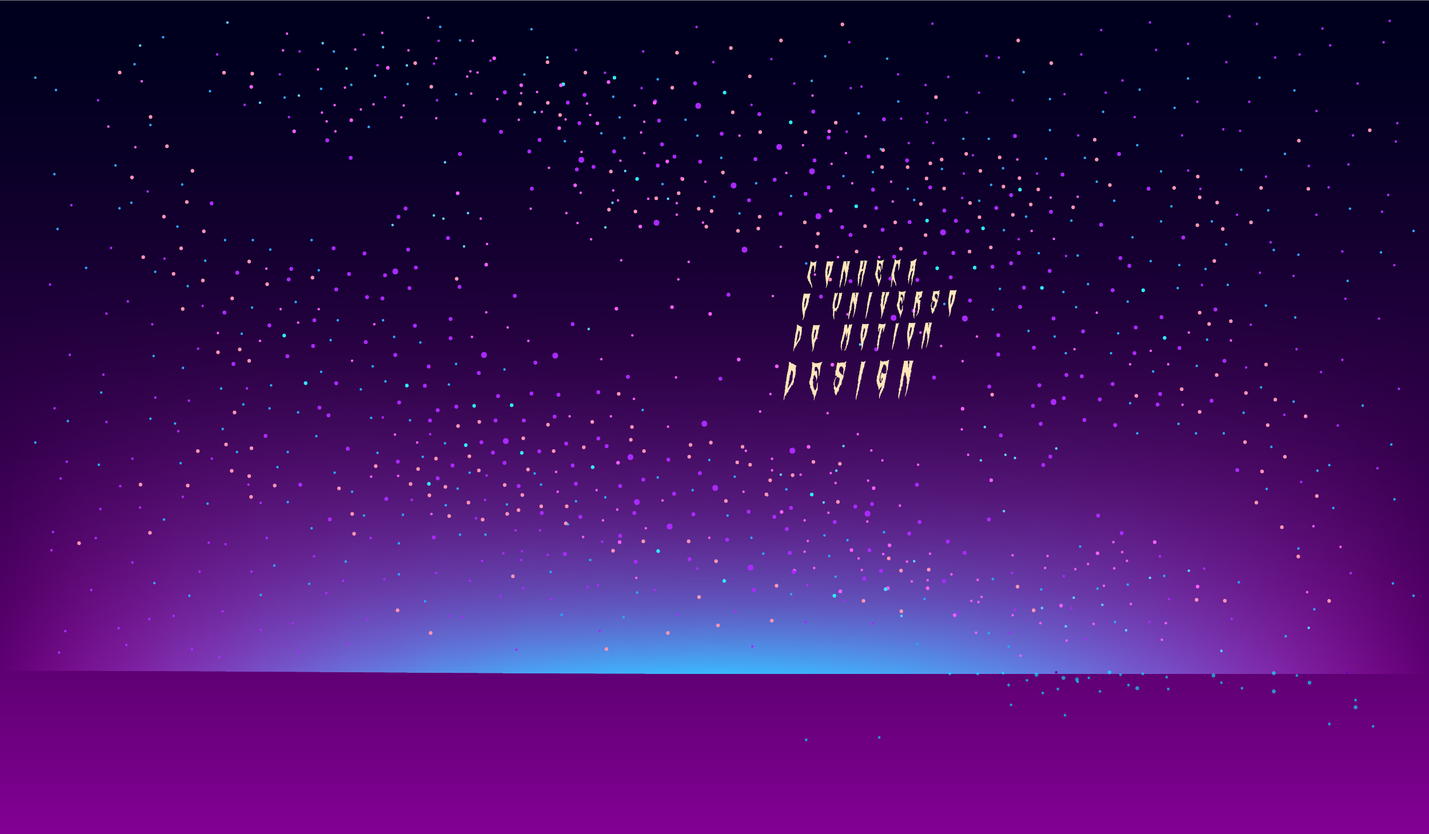
<style>
.page{position:relative;width:1429px;height:834px}
.page>*{position:absolute;margin:0}
.t1{font:27.1px "SwampWitch";letter-spacing:0.42em;color:#ffe6bb;text-transform:uppercase;scale:0.88 1}
.t2{font:39.1px "SwampWitch";letter-spacing:0.42em;color:#ffe6bb;text-transform:uppercase;scale:0.88 1}
.t3{font:10.5px "SwampWitch";letter-spacing:0.42em;color:#ffe6bb;text-transform:uppercase}
</style>
<div class="page">
<p class="t1" style="left:783px;top:258px;width:174px;height:143px;rotate:-1deg">conheca<br>o universo<br>do Motion<br><span class="t2">design</span></p>
<p class="t3" style="left:891px;top:277px;width:3px;height:11px;rotate:10deg">i</p>
</div>
